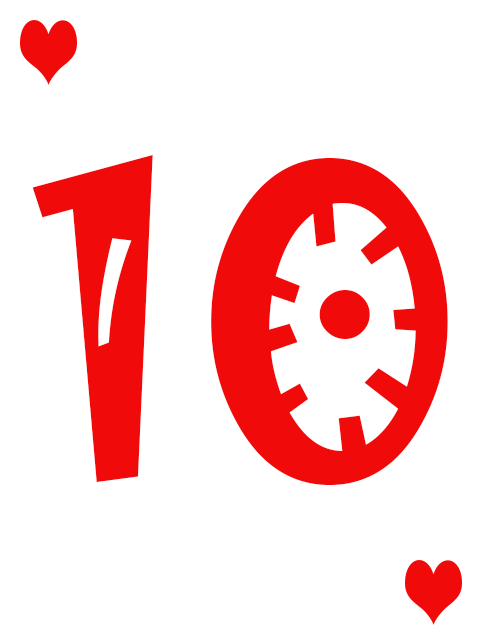
<style>
.page{position:relative;width:480px;height:640px;background:#ffffff}
.page>*{position:absolute;margin:0}
.t1{font:386.3px "Jokerman-Regular";color:#f10a0a}
</style>
<div class="page">
<p class="t1" style="left:32px;top:155px;width:416px;height:330px">10</p>
</div>
